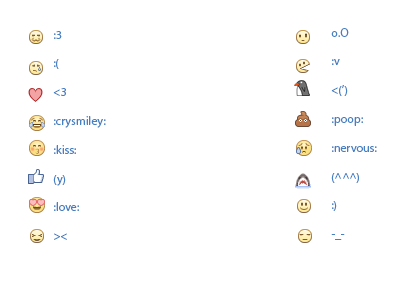
<style>
.page{position:relative;width:400px;height:300px;background:#ffffff}
.page>*{position:absolute;margin:0}
.t1{font:12px "MyriadPro-Regular";color:#4580c2}
</style>
<div class="page">
<p class="t1" style="left:331px;top:28px;width:46px;height:212px">o.O<br><br>:v<br><br>&lt;(’)<br><br>:poop:<br><br>:nervous:<br><br>(^^^)<br><br>:)<br><br>-_-</p>
<p class="t1" style="left:53px;top:31px;width:53px;height:209px">:3<br><br>:(<br><br>&lt;3<br><br>:crysmiley:<br><br>:kiss:<br><br>(y)<br><br>:love:<br><br>&gt;&lt;</p>
</div>
